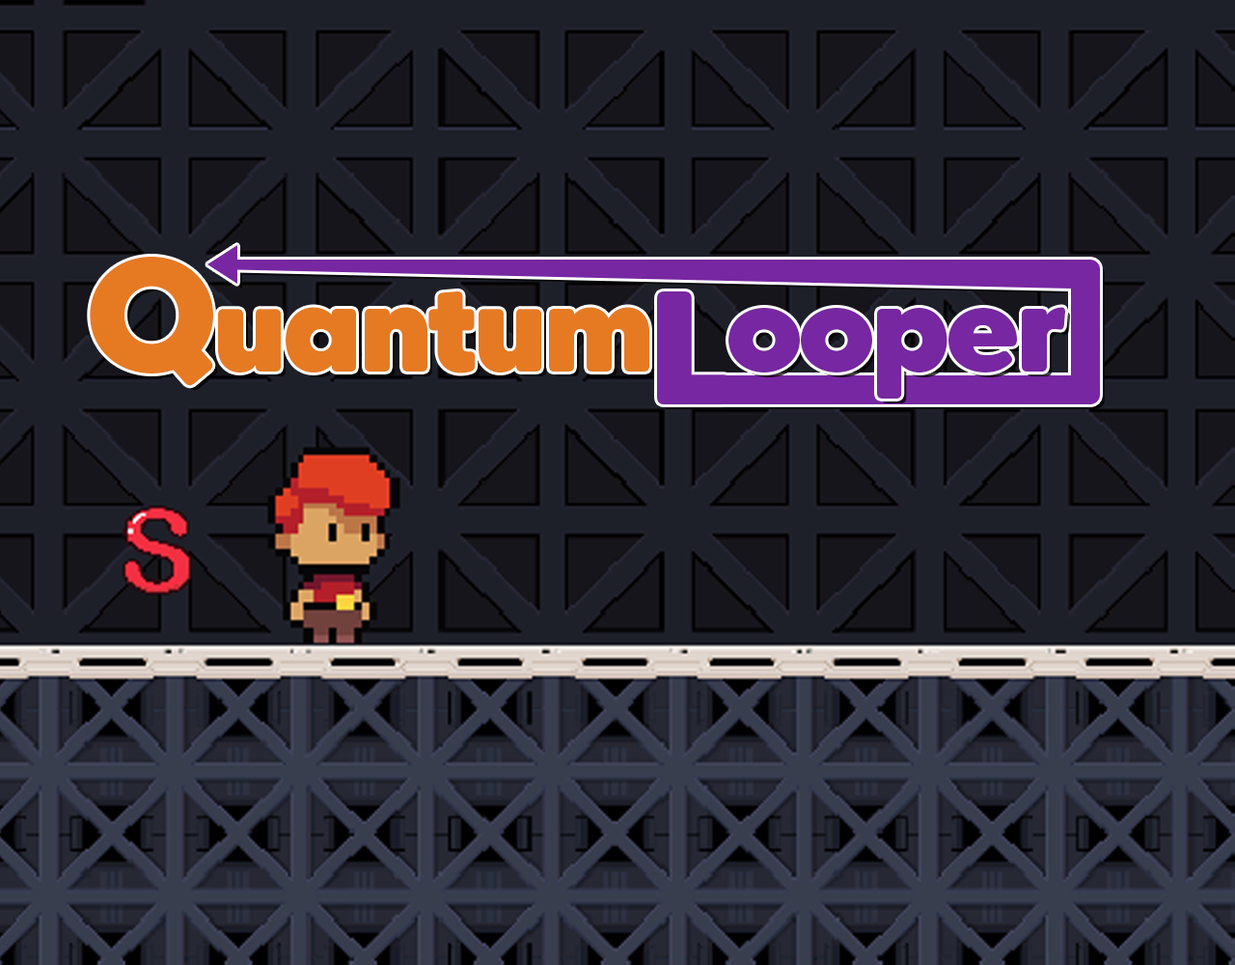
<style>
.page{position:relative;width:1235px;height:965px;background:#1e2029}
.page>*{position:absolute;margin:0}
.t1{font:120.6px "CarosSoftBlack";letter-spacing:-0.04em;color:#e57a23}
.t2{font:160.9px "CarosSoftBlack";letter-spacing:-0.04em;color:#e57a23}
.t3{font:120.6px "CarosSoftBlack";letter-spacing:0.58em;color:#e57a23}
.t4{font:120.6px "CarosSoftBlack";letter-spacing:-0.04em;color:#7727a1}
</style>
<div class="page">
<p class="t1" style="left:90px;top:256px;width:976px;height:144px"><span class="t2">Q</span>uantu<span class="t3">m</span><span class="t4">ooper</span></p>
</div>
